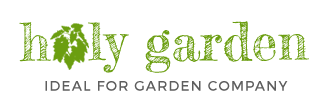
<style>
.page{position:relative;width:320px;height:110px;background:#ffffff}
.page>*{position:absolute;margin:0}
.t1{font:52px "FrederickatheGreat-Regular";color:#6b9e10}
.t2{font:14px "Montserrat-Regular";letter-spacing:0.08em;color:#5e5e5e}
</style>
<div class="page">
<p class="t1" style="left:19px;top:21px;width:290px;height:52px">h  ly garden</p>
<p class="t2" style="left:45px;top:81px;width:243px;height:10px">IDEAL FOR GARDEN COMPANY</p>
</div>
